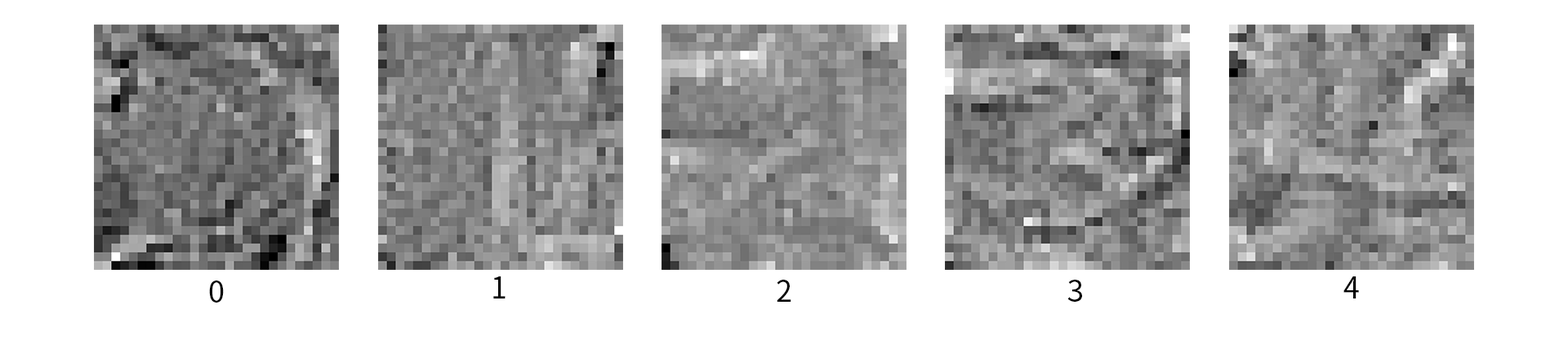
<style>
.page{position:relative;width:1568px;height:341px;background:#ffffff}
.page>*{position:absolute;margin:0}
.t1{font:29.4px "SourceHanSansCN-Regular";color:#000000}
</style>
<div class="page">
<p class="t1" style="left:209px;top:280px;width:15px;height:22px">0</p>
<p class="t1" style="left:493px;top:276px;width:13px;height:22px">1</p>
<p class="t1" style="left:777px;top:279px;width:14px;height:22px">2</p>
<p class="t1" style="left:1067px;top:279px;width:15px;height:22px">3</p>
<p class="t1" style="left:1343px;top:276px;width:16px;height:22px">4</p>
</div>
